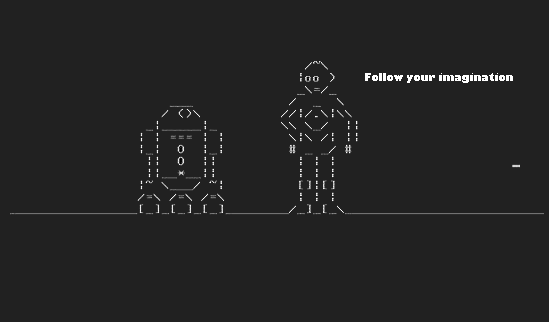
<style>
.page{position:relative;width:549px;height:322px;background:#212121}
.page>*{position:absolute;margin:0}
.t1{font:10px "GillSans-UltraBold";color:#ffffff}
</style>
<div class="page">
<p class="t1" style="left:365px;top:73px;width:148px;height:10px">Follow your imagination</p>
</div>
